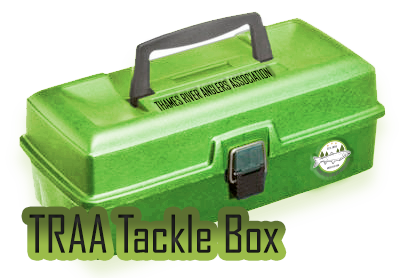
<style>
.page{position:relative;width:400px;height:278px;background:#ffffff}
.page>*{position:absolute;margin:0}
.t1{font:14.1px "AgencyFB-Regular";color:#000000;scale:0.71 1}
.t2{font:49.9px "AgencyFB-Regular";color:#1a1a1a}
</style>
<div class="page">
<p class="t1" style="left:153px;top:67px;width:120px;height:44px;rotate:-17deg">THAMES RIVER ANGLERS ASSOCIATION</p>
<p class="t2" style="left:29px;top:214px;width:250px;height:39px">TRAA Tackle Box</p>
</div>
